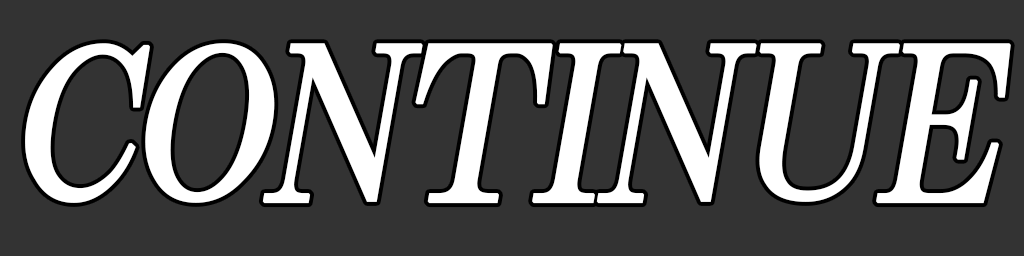
<style>
.page{position:relative;width:1024px;height:256px;background:#333333}
.page>*{position:absolute;margin:0}
.t1{font:211.8px "HGSMinchoB";letter-spacing:-0.07em;color:#ffffff;font-weight:bold;font-style:italic}
</style>
<div class="page">
<p class="t1" style="left:25px;top:43px;width:986px;height:161px">CONTINUE</p>
</div>
